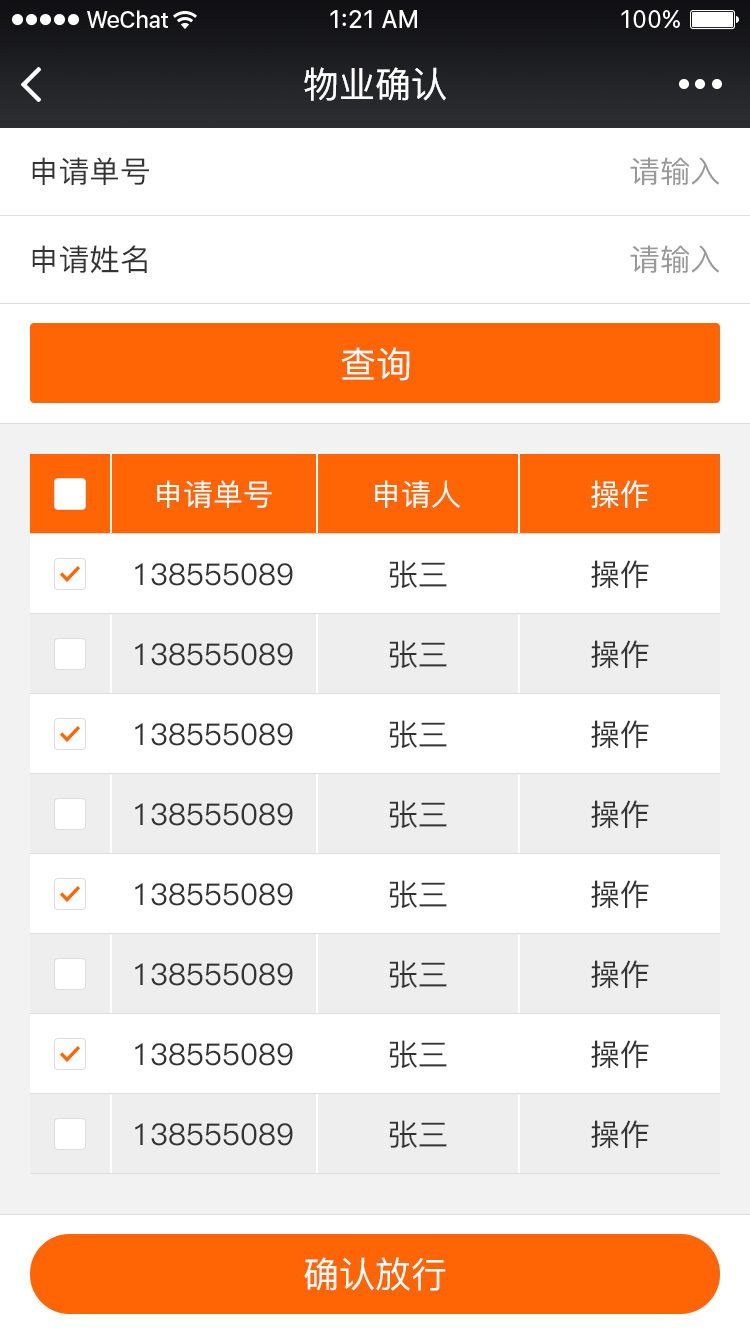
<style>
.page{position:relative;width:750px;height:1334px;background:#ffffff}
.page>*{position:absolute;margin:0}
.t1{font:36px "PingFang-SC-Medium";color:#ffffff}
.t2{font:30px "PingFang-SC-Medium";color:#333333}
.t3{font:30px "PingFang-SC-Medium";color:#999999}
.t4{font:30px "PingFang-SC-Medium";color:#ffffff}
</style>
<div class="page">
<p class="t1" style="left:304px;top:67px;width:142px;height:34px">物业确认</p>
<p class="t2" style="left:32px;top:157px;width:117px;height:28px">申请单号</p>
<p class="t3" style="left:630px;top:157px;width:90px;height:28px">请输入</p>
<p class="t2" style="left:32px;top:245px;width:115px;height:28px">申请姓名</p>
<p class="t3" style="left:630px;top:245px;width:90px;height:28px">请输入</p>
<p class="t1" style="left:341px;top:347px;width:69px;height:34px">查询</p>
<p class="t4" style="left:157px;top:480px;width:115px;height:28px">申请单号</p>
<p class="t4" style="left:375px;top:480px;width:85px;height:28px">申请人</p>
<p class="t4" style="left:591px;top:480px;width:58px;height:28px">操作</p>
<p class="t2" style="left:135px;top:563px;width:158px;height:23px">138555089</p>
<p class="t2" style="left:389px;top:560px;width:58px;height:28px">张三</p>
<p class="t2" style="left:591px;top:560px;width:58px;height:28px">操作</p>
<p class="t2" style="left:389px;top:640px;width:58px;height:28px">张三</p>
<p class="t2" style="left:591px;top:640px;width:58px;height:28px">操作</p>
<p class="t2" style="left:135px;top:643px;width:158px;height:23px">138555089</p>
<p class="t2" style="left:135px;top:723px;width:158px;height:23px">138555089</p>
<p class="t2" style="left:389px;top:720px;width:58px;height:28px">张三</p>
<p class="t2" style="left:591px;top:720px;width:58px;height:28px">操作</p>
<p class="t2" style="left:135px;top:803px;width:158px;height:23px">138555089</p>
<p class="t2" style="left:389px;top:800px;width:58px;height:28px">张三</p>
<p class="t2" style="left:591px;top:800px;width:58px;height:28px">操作</p>
<p class="t2" style="left:389px;top:880px;width:58px;height:28px">张三</p>
<p class="t2" style="left:591px;top:880px;width:58px;height:28px">操作</p>
<p class="t2" style="left:135px;top:883px;width:158px;height:23px">138555089</p>
<p class="t2" style="left:135px;top:963px;width:158px;height:23px">138555089</p>
<p class="t2" style="left:389px;top:960px;width:58px;height:28px">张三</p>
<p class="t2" style="left:591px;top:960px;width:58px;height:28px">操作</p>
<p class="t2" style="left:135px;top:1043px;width:158px;height:23px">138555089</p>
<p class="t2" style="left:389px;top:1040px;width:58px;height:28px">张三</p>
<p class="t2" style="left:591px;top:1040px;width:58px;height:28px">操作</p>
<p class="t2" style="left:389px;top:1120px;width:58px;height:28px">张三</p>
<p class="t2" style="left:591px;top:1120px;width:58px;height:28px">操作</p>
<p class="t2" style="left:135px;top:1123px;width:158px;height:23px">138555089</p>
<p class="t1" style="left:304px;top:1257px;width:142px;height:34px">确认放行</p>
</div>
